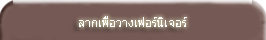
<style>
.page{position:relative;width:266px;height:40px;background:#745954}
.page>*{position:absolute;margin:0}
.t1{font:12px "Tahoma";color:#ffffff}
</style>
<div class="page">
<p class="t1" style="left:79px;top:16px;width:108px;height:11px">ลากเพื่อวางเฟอร์นิเจอร์</p>
</div>
